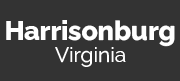
<style>
.page{position:relative;width:180px;height:81px;background:#333333}
.page>*{position:absolute;margin:0}
.t1{font:26.7px "RalewayRoman-ExtraBold";color:#ffffff}
.t2{font:20.8px "RalewayRoman-Regular";color:#ffffff}
</style>
<div class="page">
<p class="t1" style="left:6px;top:20px;width:169px;height:27px">Harrisonburg</p>
<p class="t2" style="left:55px;top:47px;width:71px;height:20px">Virginia</p>
</div>
